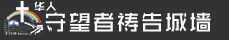
<style>
.page{position:relative;width:229px;height:40px;background:#333333}
.page>*{position:absolute;margin:0}
.t1{font:11px "ZHSCNMT--GBK1-0";letter-spacing:0.05em;color:#ffffff}
.t2{font:23px "ZHSCNMT--GBK1-0";letter-spacing:0.05em;color:#fefefe}
</style>
<div class="page">
<p class="t1" style="left:34px;top:1px;width:22px;height:10px">华人</p>
<p class="t2" style="left:45px;top:12px;width:166px;height:20px">守望者祷告城墙</p>
</div>
